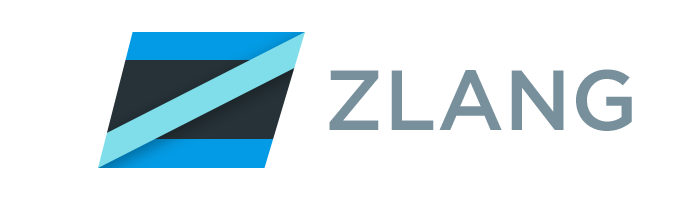
<style>
.page{position:relative;width:700px;height:200px;background:#ffffff}
.page>*{position:absolute;margin:0}
.t1{font:85.1px "GothamMedium";color:#78909c}
</style>
<div class="page">
<p class="t1" style="left:329px;top:69px;width:303px;height:62px">ZLANG</p>
</div>
